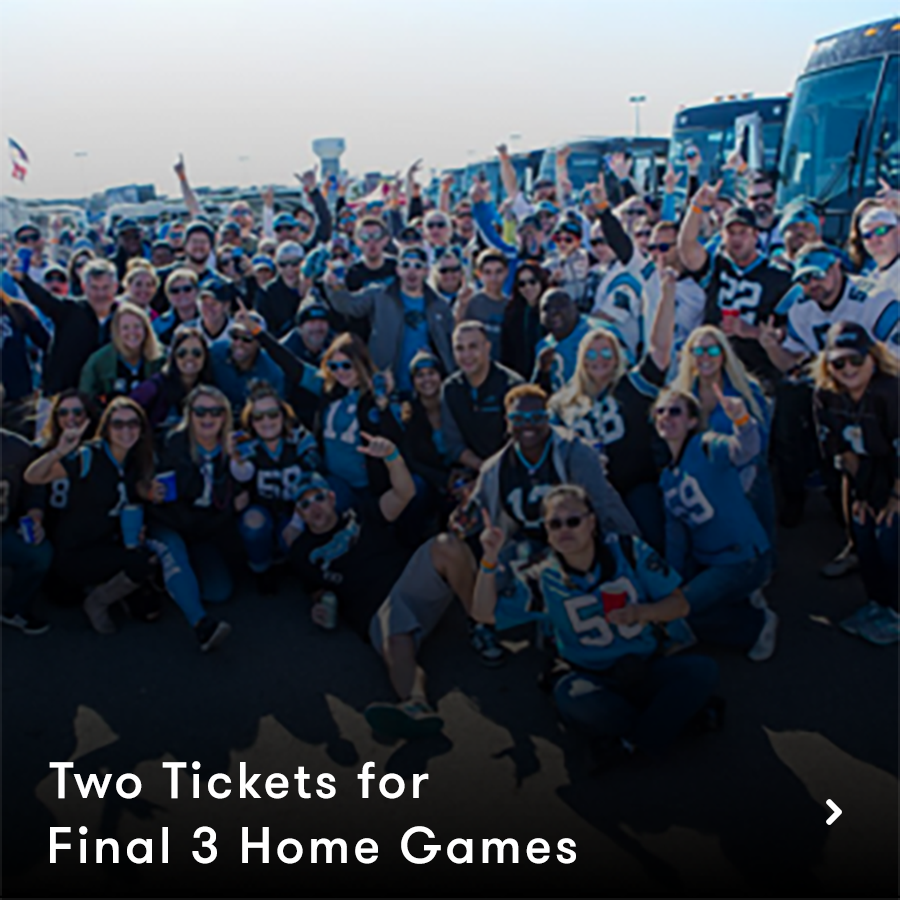
<style>
.page{position:relative;width:900px;height:900px}
.page>*{position:absolute;margin:0}
.t1{font:51px "GTWalsheimProMedium";letter-spacing:0.06em;color:#ffffff}
</style>
<div class="page">
<p class="t1" style="left:49px;top:761px;width:380px;height:38px">Two Tickets for</p>
<p class="t1" style="left:50px;top:826px;width:526px;height:38px">Final 3 Home Games</p>
</div>
